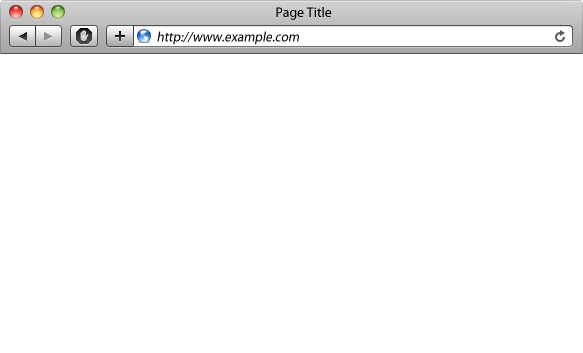
<style>
.page{position:relative;width:583px;height:353px;background:#ffffff}
.page>*{position:absolute;margin:0}
.t1{font:14px "MyriadPro-Regular";color:#000000}
.t2{font:14px "MyriadPro-Regular";color:#000000;font-style:italic;scale:0.95 1}
</style>
<div class="page">
<p class="t1" style="left:276px;top:7px;width:56px;height:13px">Page Title</p>
<p class="t2" style="left:157px;top:31px;width:142px;height:14px">http://www.example.com</p>
</div>
